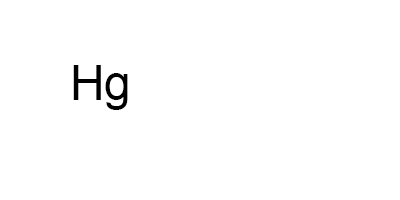
<style>
.page{position:relative;width:400px;height:200px;background:#ffffff}
.page>*{position:absolute;margin:0}
.t1{font:48px "ArialMT";color:#000000}
</style>
<div class="page">
<p class="t1" style="left:73px;top:65px;width:55px;height:45px">Hg</p>
</div>
